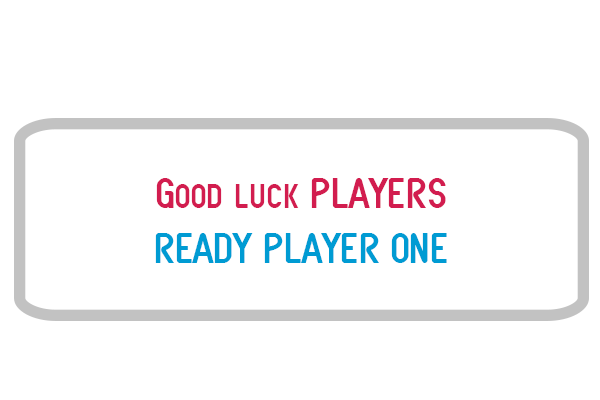
<style>
.page{position:relative;width:600px;height:400px;background:#ffffff}
.page>*{position:absolute;margin:0}
.t1{font:45.3px "SFAtarianSystem";color:#d21d4f}
.t2{font:45.3px "SFAtarianSystem";color:#009bd3}
</style>
<div class="page">
<p class="t1" style="left:155px;top:178px;width:292px;height:85px;text-align:center">Good luck PLAYERS<br><span class="t2">READY PLAYER ONE</span></p>
</div>
